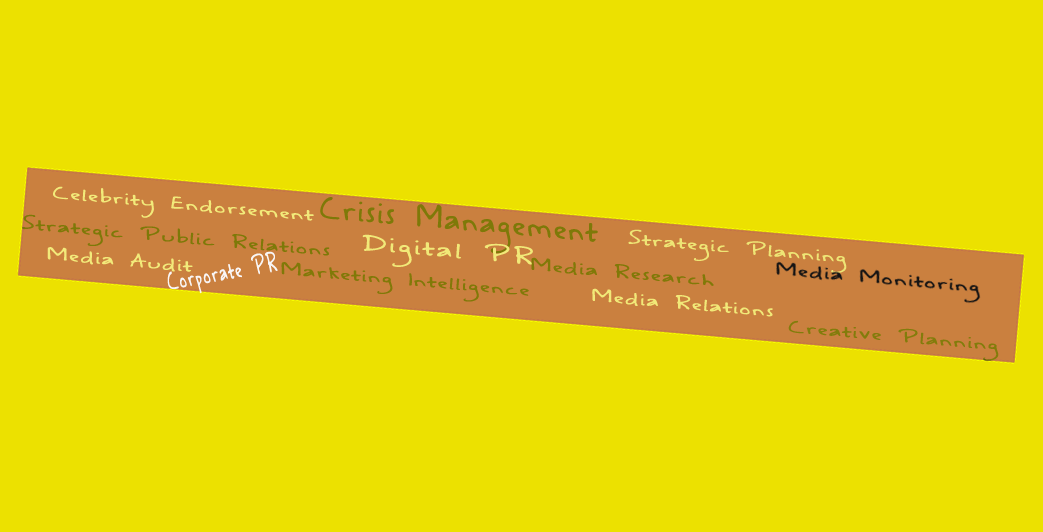
<style>
.page{position:relative;width:1043px;height:532px;background:#ece100}
.page>*{position:absolute;margin:0}
.t1{font:16.8px "ASafePlacetoFall";letter-spacing:0.075em;color:#f2ea7a;scale:1.5 1}
.t2{font:30.6px "ASafePlacetoFall";letter-spacing:0.075em;color:#7e7908;scale:1.06 1}
.t3{font:16.8px "ASafePlacetoFall";letter-spacing:0.075em;color:#7e7908;scale:1.5 1}
.t4{font:16.8px "ASafePlacetoFall";letter-spacing:0.075em;color:#eee575;scale:1.5 1}
.t5{font:21.6px "ASafePlacetoFall";letter-spacing:0.1em;color:#f1e978;scale:1.5 1}
.t6{font:25.2px "ASafePlacetoFall";letter-spacing:0.1em;color:#f9f6f6;scale:0.64 1}
.t7{font:16.8px "ASafePlacetoFall";letter-spacing:0.075em;color:#817908;scale:1.5 1}
.t8{font:16.8px "ASafePlacetoFall";letter-spacing:0.075em;color:#f1e978;scale:1.5 1}
.t9{font:16.8px "ASafePlacetoFall";letter-spacing:0.075em;color:#837c0b;scale:1.5 1}
</style>
<div class="page">
<p class="t1" style="left:53px;top:186px;width:261px;height:35px;rotate:5deg">Celebrity Endorsement</p>
<p class="t2" style="left:320px;top:197px;width:278px;height:57px;rotate:5deg">Crisis Management</p>
<p class="t3" style="left:22px;top:214px;width:308px;height:42px;rotate:5deg">Strategic Public Relations</p>
<p class="t4" style="left:628px;top:229px;width:219px;height:44px;rotate:5deg">Strategic Planning</p>
<p class="t5" style="left:362px;top:234px;width:171px;height:33px;rotate:5deg">Digital PR</p>
<p class="t1" style="left:47px;top:247px;width:146px;height:25px;rotate:5deg">Media Audit</p>
<p class="t6" style="left:167px;top:251px;width:111px;height:43px;rotate:-10deg">Corporate PR</p>
<p class="t7" style="left:531px;top:257px;width:183px;height:29px;rotate:5deg">Media Research</p>
<p class="t7" style="left:281px;top:262px;width:248px;height:40px;rotate:5deg">Marketing Intelligence</p>
<p class="t8" style="left:592px;top:288px;width:181px;height:29px;rotate:5deg">Media Relations</p>
<p class="t9" style="left:788px;top:320px;width:211px;height:41px;rotate:5deg">Creative Planning</p>
</div>
